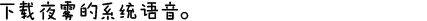
<style>
.page{position:relative;width:427px;height:21px;background:#ffffff}
.page>*{position:absolute;margin:0}
.t1{font:22px "¢è?";color:#000000}
</style>
<div class="page">
<p class="t1" style="left:0px;top:0px;width:189px;height:21px">下载夜雾的系统语音。</p>
</div>
